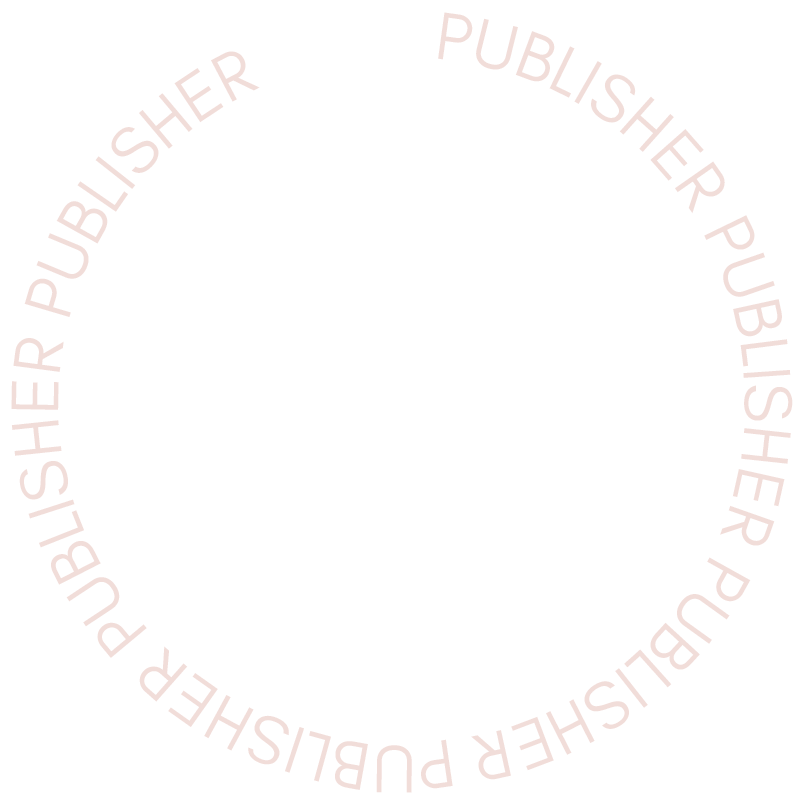
<style>
.page{position:relative;width:804px;height:804px;background:#ffffff}
.page>*{position:absolute;margin:0}
.t1{font:68.6px/21.4px "GlacialIndifference-Regular";color:#f1ddd9}
</style>
<div class="page">
<p class="t1" style="left:11px;top:12px;width:782px;height:781px">PUBLISHER PUBLISHER PUBLISHER PUBLISHER PUBLISHER PUBLISHER</p>
</div>
